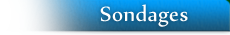
<style>
.page{position:relative;width:230px;height:35px}
.page>*{position:absolute;margin:0}
.t1{font:25px "Nyala-Regular";letter-spacing:0.025em;color:#ffffff}
</style>
<div class="page">
<p class="t1" style="left:100px;top:4px;width:88px;height:23px">Sondages</p>
</div>
